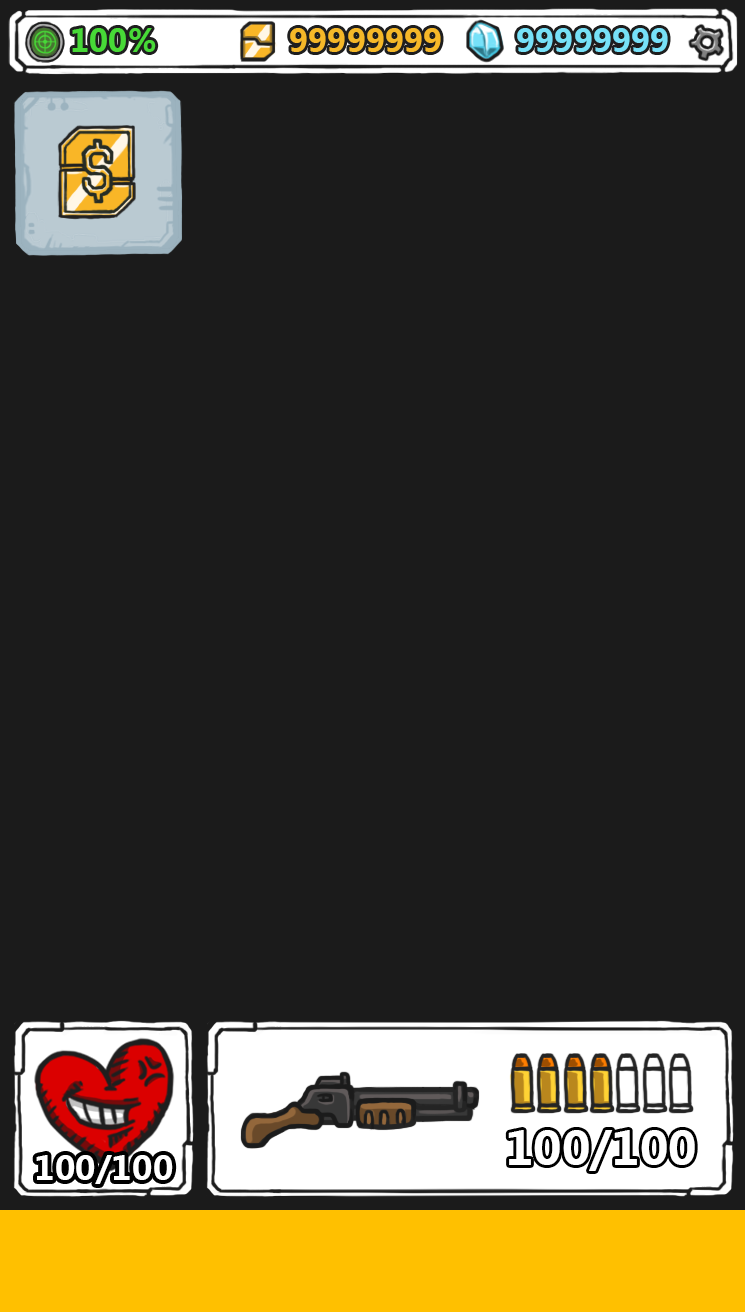
<style>
.page{position:relative;width:745px;height:1312px;background:#1b1b1b}
.page>*{position:absolute;margin:0}
.t1{font:33.3px "KhmerUI-Bold";color:#47d937}
.t2{font:33.3px "KhmerUI-Bold";color:#f5b828}
.t3{font:33.3px "KhmerUI-Bold";color:#77e1f8}
</style>
<div class="page">
<p class="t1" style="left:72px;top:28px;width:84px;height:24px">100%</p>
<p class="t2" style="left:290px;top:28px;width:151px;height:24px">99999999</p>
<p class="t3" style="left:517px;top:28px;width:151px;height:24px">99999999</p>
</div>
